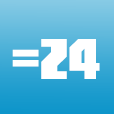
<style>
.page{position:relative;width:114px;height:114px}
.page>*{position:absolute;margin:0}
.t1{font:45px "MFJinHei_Noncommercial-Regular";color:#ffffff}
</style>
<div class="page">
<p class="t1" style="left:12px;top:39px;width:88px;height:40px">=24</p>
</div>
